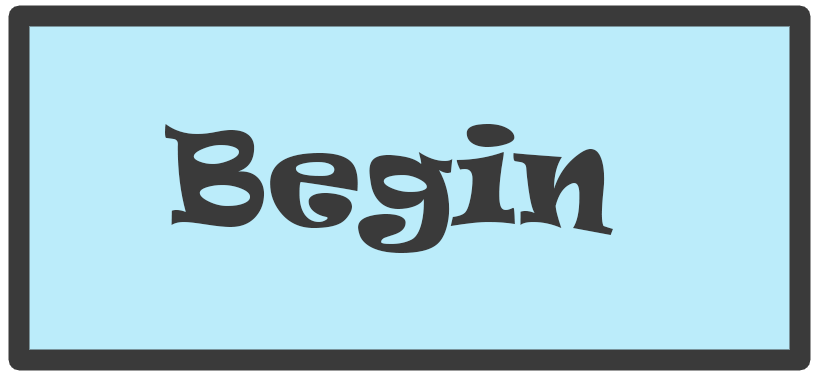
<style>
.page{position:relative;width:817px;height:379px;background:#bbecfa}
.page>*{position:absolute;margin:0}
.t1{font:125px "Ravie";color:#3a3a3a}
</style>
<div class="page">
<p class="t1" style="left:165px;top:124px;width:448px;height:129px">Begin</p>
</div>
